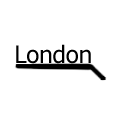
<style>
.page{position:relative;width:128px;height:128px;background:#ffffff}
.page>*{position:absolute;margin:0}
.t1{font:23.9px "Tahoma";color:#000000}
</style>
<div class="page">
<p class="t1" style="left:16px;top:44px;width:75px;height:20px">London</p>
</div>
